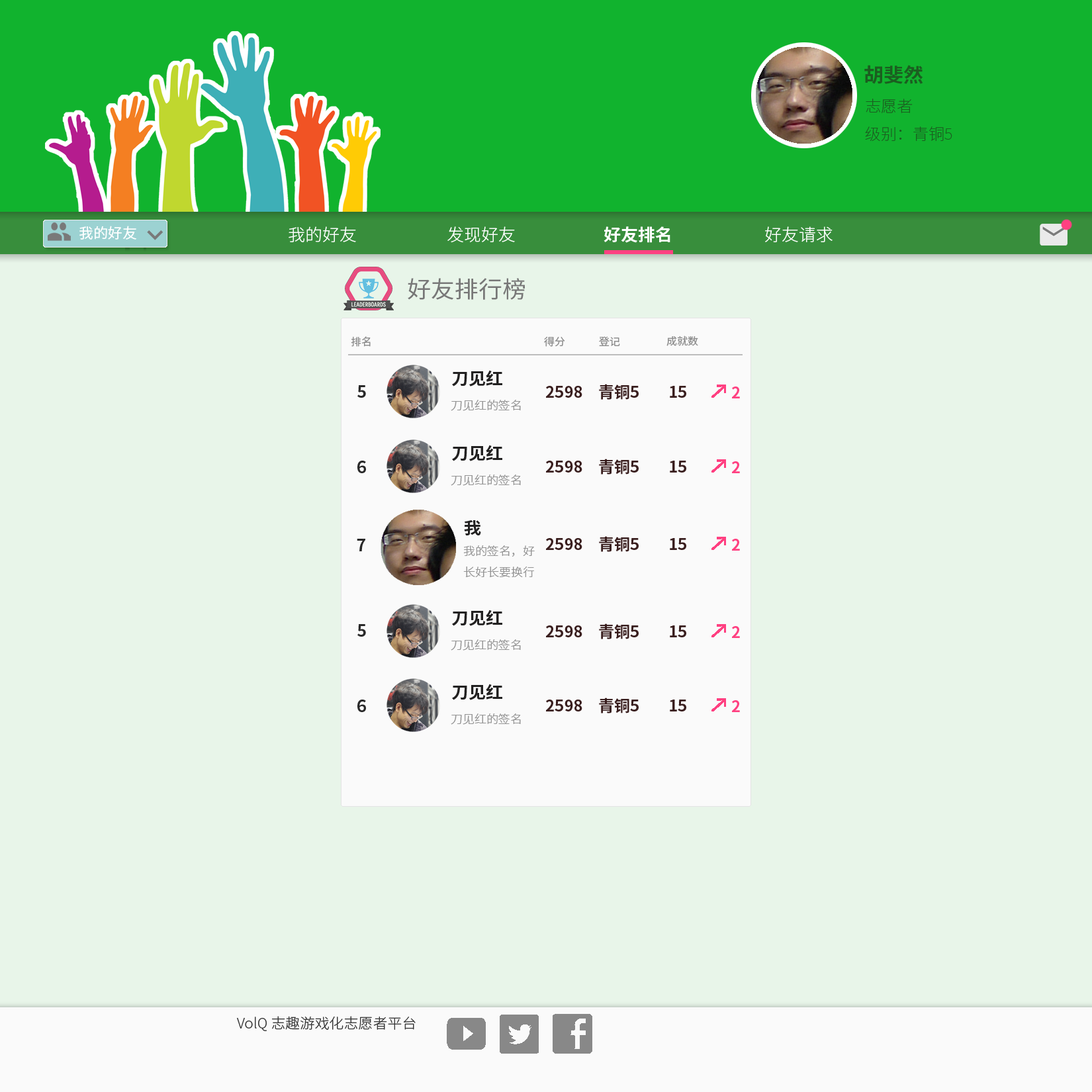
<style>
.page{position:relative;width:1092px;height:1092px;background:#e8f5e9}
.page>*{position:absolute;margin:0}
.t1{font:19.5px "NotoSansCJKsc-Bold";color:#1b5e20}
.t2{font:15.6px "NotoSansCJKsc-Thin";color:#1b5e20}
.t3{font:14.3px "NotoSansCJKsc-Regular";color:#ffffff}
.t4{font:16.9px "NotoSansCJKsc-Light";color:#ffffff}
.t5{font:16.9px "NotoSansCJKsc-Bold";color:#ffffff}
.t6{font:23.3px "NotoSansCJKsc-Regular";color:#777777}
.t7{font:10.4px "NotoSansCJKsc-Regular";color:#8e8e8e}
.t8{font:16.2px/75.4px "NotoSansCJKsc-Bold";color:#292929}
.t9{font:16.9px "NotoSansCJKsc-Bold";color:#222121}
.t10{font:16.2px "NotoSansCJKsc-Bold";color:#292929}
.t11{font:11.7px "NotoSansCJKsc-Light";color:#949494}
.t12{font:15.6px "NotoSansCJKsc-Bold";color:#391e1e}
.t13{font:15.6px "NotoSansCJKsc-Bold";color:#ff4081}
.t14{font:14.3px "NotoSansCJKsc-Light";color:#353535}
</style>
<div class="page">
<p class="t1" style="left:864px;top:65px;width:59px;height:19px">胡斐然</p>
<p class="t2" style="left:865px;top:99px;width:87px;height:42px">志愿者<br>级别：青铜5</p>
<p class="t3" style="left:79px;top:226px;width:57px;height:14px">我的好友</p>
<p class="t4" style="left:289px;top:226px;width:67px;height:16px">我的好友</p>
<p class="t4" style="left:447px;top:226px;width:68px;height:17px">发现好友</p>
<p class="t5" style="left:604px;top:226px;width:66px;height:17px">好友排名</p>
<p class="t4" style="left:765px;top:226px;width:68px;height:16px">好友请求</p>
<p class="t6" style="left:408px;top:278px;width:117px;height:22px">好友排行榜</p>
<p class="t7" style="left:351px;top:336px;width:20px;height:11px">排名</p>
<p class="t7" style="left:544px;top:336px;width:21px;height:11px">得分</p>
<p class="t7" style="left:599px;top:336px;width:21px;height:10px">登记</p>
<p class="t7" style="left:666px;top:336px;width:32px;height:10px">成就数</p>
<p class="t8" style="left:357px;top:385px;width:9px;height:88px">5<br>6</p>
<p class="t9" style="left:464px;top:520px;width:17px;height:15px">我</p>
<p class="t10" style="left:357px;top:539px;width:8px;height:12px">7</p>
<p class="t11" style="left:463px;top:545px;width:72px;height:32px">我的签名，好<br>长好长要换行</p>
<p class="t12" style="left:546px;top:538px;width:36px;height:12px">2598</p>
<p class="t12" style="left:599px;top:536px;width:40px;height:16px">青铜5</p>
<p class="t12" style="left:670px;top:538px;width:16px;height:12px">15</p>
<p class="t13" style="left:732px;top:539px;width:8px;height:12px">2</p>
<p class="t8" style="left:357px;top:624px;width:9px;height:88px">5<br>6</p>
<p class="t14" style="left:237px;top:1016px;width:179px;height:15px">VolQ 志趣游戏化志愿者平台</p>
</div>
